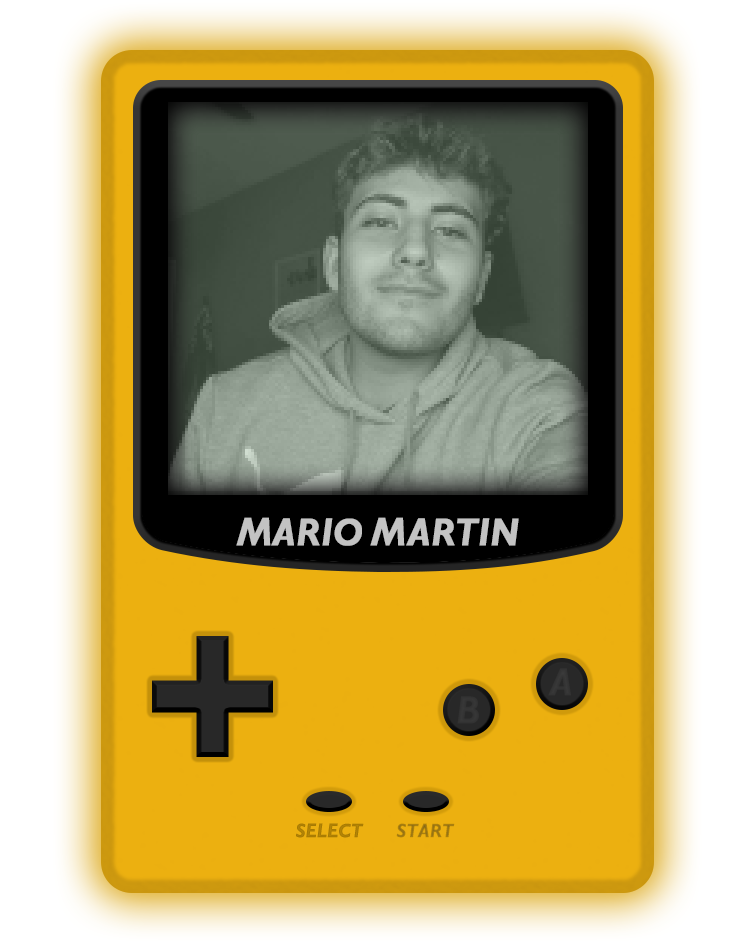
<style>
.page{position:relative;width:754px;height:942px;background:#ecb010}
.page>*{position:absolute;margin:0}
.t1{font:36px "GameBoy1989";letter-spacing:0.01em;color:#c3c3c3;font-weight:bold}
.t2{font:36px "GameBoy1989";letter-spacing:0.01em;color:#2f2f2f;font-weight:bold}
.t3{font:18px "GameBoy1989";letter-spacing:0.01em;color:#ac7e04;font-weight:bold}
.t4{font:18px "GameBoy1989";letter-spacing:0.01em;color:#a47c10;font-weight:bold}
</style>
<div class="page">
<p class="t1" style="left:236px;top:517px;width:283px;height:29px">MARIO MARTIN</p>
<p class="t2" style="left:548px;top:668px;width:23px;height:28px">A</p>
<p class="t2" style="left:457px;top:696px;width:22px;height:28px">B</p>
<p class="t3" style="left:296px;top:823px;width:68px;height:15px">SELECT</p>
<p class="t4" style="left:396px;top:823px;width:59px;height:15px">START</p>
</div>
